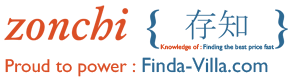
<style>
.page{position:relative;width:290px;height:80px;background:#ffffff}
.page>*{position:absolute;margin:0}
.t1{font:6.7px "GillSansMT";letter-spacing:0.008em;color:#2d6993}
.t2{font:6.7px "GillSansMT";letter-spacing:0.008em;color:#dc4f26}
.t3{font:18.8px "GillSansMT";color:#dc4f26}
.t4{font:20.8px "GillSansMT";color:#2d6993}
</style>
<div class="page">
<p class="t1" style="left:160px;top:44px;width:114px;height:7px"><span class="t2">Knowledge of : </span>Finding the best price fast</p>
<p class="t3" style="left:5px;top:59px;width:131px;height:18px">Proud to power :</p>
<p class="t4" style="left:142px;top:57px;width:126px;height:16px">Finda-Villa.com</p>
</div>
